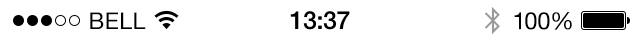
<style>
.page{position:relative;width:640px;height:40px;background:#ffffff}
.page>*{position:absolute;margin:0}
.t1{font:23px "HelveticaNeue";letter-spacing:0.02em;color:#000000}
.t2{font:25px "HelveticaNeue-Medium";letter-spacing:-0.02em;color:#000000}
.t3{font:24px "HelveticaNeue";letter-spacing:-0.02em;color:#000000}
</style>
<div class="page">
<p class="t1" style="left:90px;top:12px;width:56px;height:17px">BELL</p>
<p class="t1" style="left:90px;top:12px;width:56px;height:17px">BELL</p>
<p class="t2" style="left:290px;top:11px;width:60px;height:19px">13:37</p>
<p class="t2" style="left:291px;top:11px;width:59px;height:19px">13:37</p>
<p class="t3" style="left:514px;top:12px;width:58px;height:18px">100%</p>
<p class="t3" style="left:514px;top:12px;width:58px;height:18px">100%</p>
</div>
